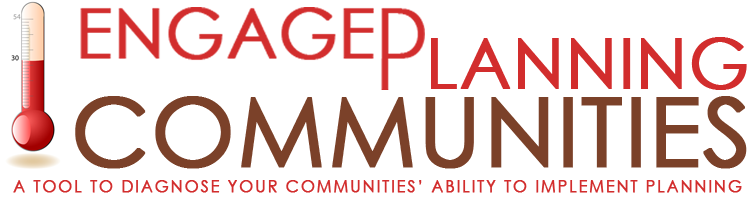
<style>
.page{position:relative;width:756px;height:197px;background:#ffffff}
.page>*{position:absolute;margin:0}
.t1{font:69.2px "CenturyGothic";color:#d22d2d;font-weight:bold}
.t2{font:95.8px "CenturyGothic";color:#7b4129;font-weight:bold}
.t3{font:16px "CenturyGothic";letter-spacing:0.1em;color:#d22d2d;font-weight:bold}
</style>
<div class="page">
<p class="t1" style="left:431px;top:37px;width:316px;height:53px">LANNING</p>
<p class="t2" style="left:75px;top:96px;width:672px;height:73px">COMMUNITIES</p>
<p class="t3" style="left:13px;top:180px;width:729px;height:13px;text-align:center">A TOOL TO DIAGNOSE YOUR COMMUNITIES’ ABILITY TO IMPLEMENT PLANNING <br> ABILITY TO</p>
</div>
